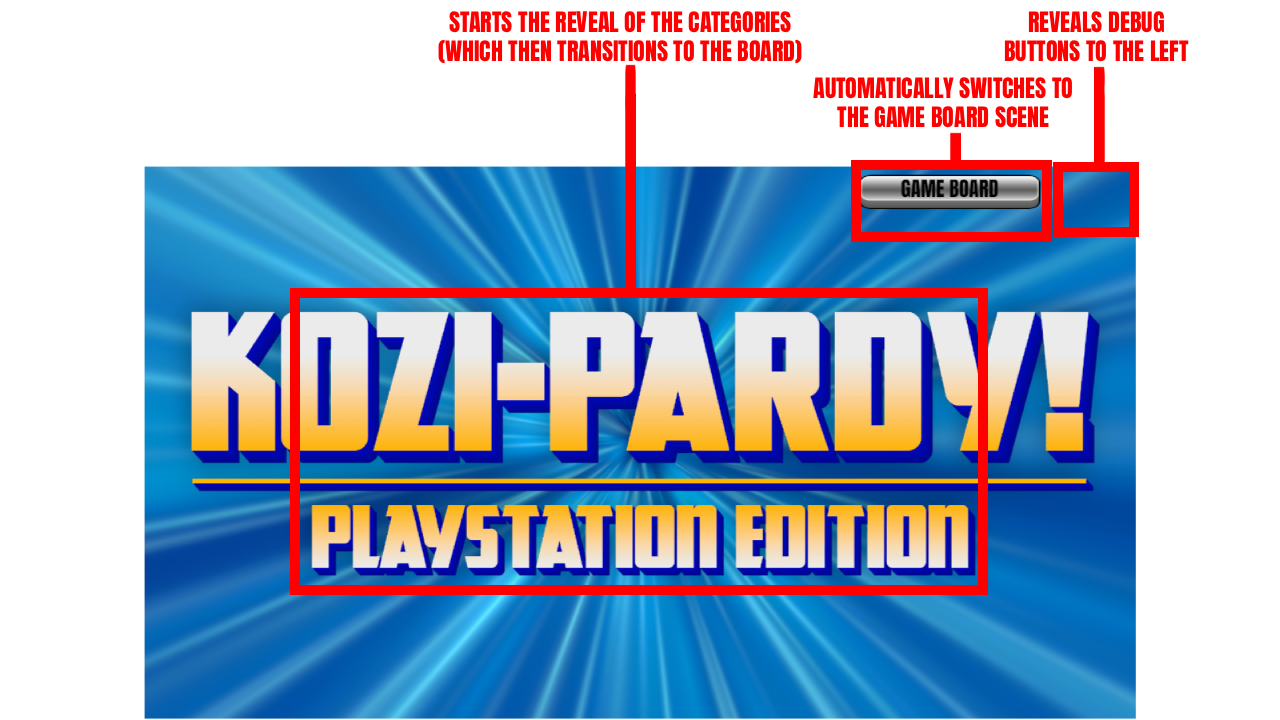
<style>
.page{position:relative;width:1280px;height:720px;background:#ffffff}
.page>*{position:absolute;margin:0}
.t1{font:24px "Anton-Regular";color:#ff0000}
</style>
<div class="page">
<p class="t1" style="left:438px;top:11px;width:364px;height:53px;text-align:center">STARTS THE REVEAL OF THE CATEGORIES<br>(WHICH THEN TRANSITIONS TO THE BOARD)</p>
<p class="t1" style="left:1004px;top:11px;width:185px;height:51px;text-align:center">REVEALS DEBUG<br>BUTTONS TO THE LEFT</p>
<p class="t1" style="left:813px;top:77px;width:259px;height:51px;text-align:center">AUTOMATICALLY SWITCHES TO<br>THE GAME BOARD SCENE</p>
</div>
